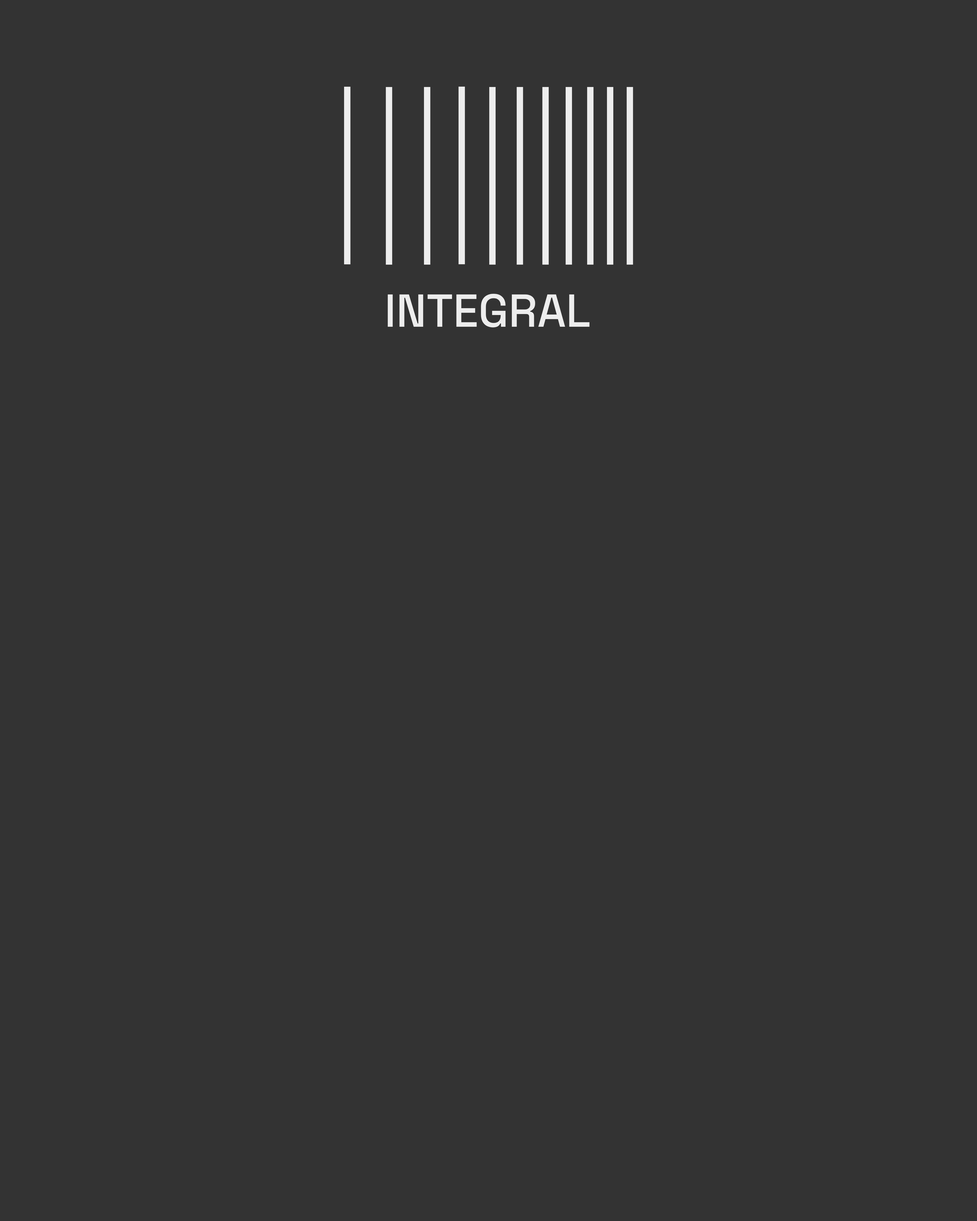
<style>
.page{position:relative;width:977px;height:1221px;background:#333333}
.page>*{position:absolute;margin:0}
.t1{font:46.2px "SpaceGroteskLight-Medium";color:#ededed}
</style>
<div class="page">
<p class="t1" style="left:388px;top:294px;width:201px;height:33px">INTEGRAL</p>
</div>
